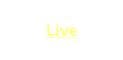
<style>
.page{position:relative;width:123px;height:60px;background:#ffffff}
.page>*{position:absolute;margin:0}
.t1{font:16px "AeroRegularSWFTE";color:#fffe7e;text-decoration:underline}
</style>
<div class="page">
<p class="t1" style="left:46px;top:24px;width:32px;height:15px">Live</p>
</div>
